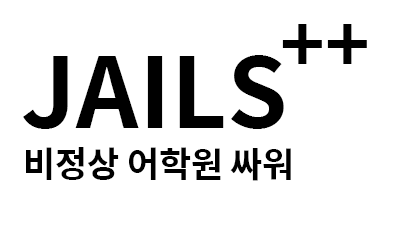
<style>
.page{position:relative;width:400px;height:230px;background:#ffffff}
.page>*{position:absolute;margin:0}
.t1{font:76.4px "SpoqaHanSans-Bold";color:#000000}
.t2{font:97.2px "SpoqaHanSans-Bold";color:#000000}
.t3{font:34.7px "SpoqaHanSans-Bold";color:#000000}
</style>
<div class="page">
<p class="t1" style="left:282px;top:24px;width:85px;height:40px">++</p>
<p class="t2" style="left:23px;top:55px;width:261px;height:74px">JAILS</p>
<p class="t3" style="left:26px;top:147px;width:265px;height:34px">비정상 어학원 싸워</p>
</div>
